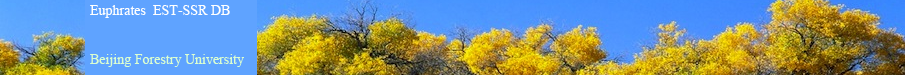
<style>
.page{position:relative;width:905px;height:75px}
.page>*{position:absolute;margin:0}
.t1{font:14px "TimesNewRomanPSMT";color:#dbfed0}
.t2{font:14px "TimesNewRomanPSMT";color:#ffffff}
</style>
<div class="page">
<p class="t1" style="left:90px;top:5px;width:154px;height:62px"><span class="t2">Euphrates  EST-SSR DB<br><br></span>Beijing Forestry University</p>
</div>
